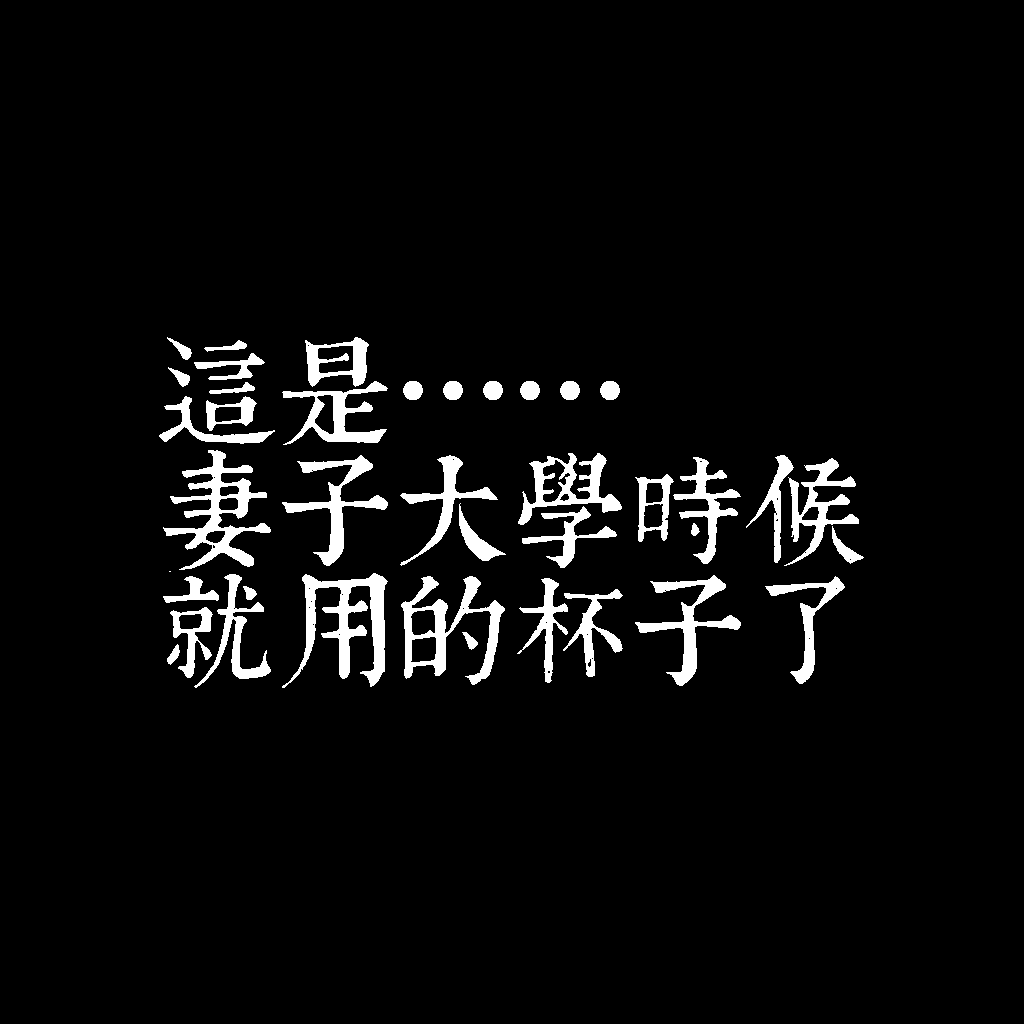
<style>
.page{position:relative;width:1024px;height:1024px;background:#000000}
.page>*{position:absolute;margin:0}
.t1{font:120px/120px "TpldKhangXiDictTrial";letter-spacing:-0.02em;color:#ffffff}
</style>
<div class="page">
<p class="t1" style="left:159px;top:337px;width:705px;height:351px">這是……<br>妻子大學時候<br>就用的杯子了</p>
</div>
